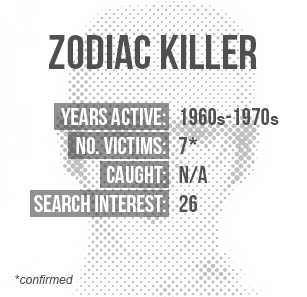
<style>
.page{position:relative;width:307px;height:297px;background:#ffffff}
.page>*{position:absolute;margin:0}
.t1{font:48px "BebasNeue";color:#505050}
.t2{font:24px "BebasNeue";color:#ffffff}
.t3{font:24px/125px "BebasNeue";color:#ffffff}
.t4{font:24px "BebasNeue";color:#505050}
.t5{font:24px/125px "BebasNeue";color:#505050}
.t6{font:16px/125px "Arial-BoldMT";color:#505050}
.t7{font:24px "Arial-BoldMT";color:#505050}
.t8{font:12px "Arial-ItalicMT";color:#505050}
.t9{font:12px "Arial-BoldMT";color:#505050}
</style>
<div class="page">
<p class="t1" style="left:49px;top:35px;width:208px;height:34px">ZODIAC KILLER</p>
<p class="t2" style="left:34px;top:108px;width:132px;height:104px;text-align:right"><span class="t3">YEARS ACTIVE:<br></span>No. Victims:<br>cAUGHT:<br>SEARCH INTEREST:</p>
<p class="t4" style="left:179px;top:108px;width:100px;height:104px"><span class="t5">1960</span><span class="t6">s</span><span class="t5">-1970</span><span class="t6">s<br></span>7<span class="t7">*<br></span>n/a<br>26</p>
<p class="t8" style="left:15px;top:275px;width:58px;height:9px"><span class="t9">*</span>confirmed</p>
</div>
